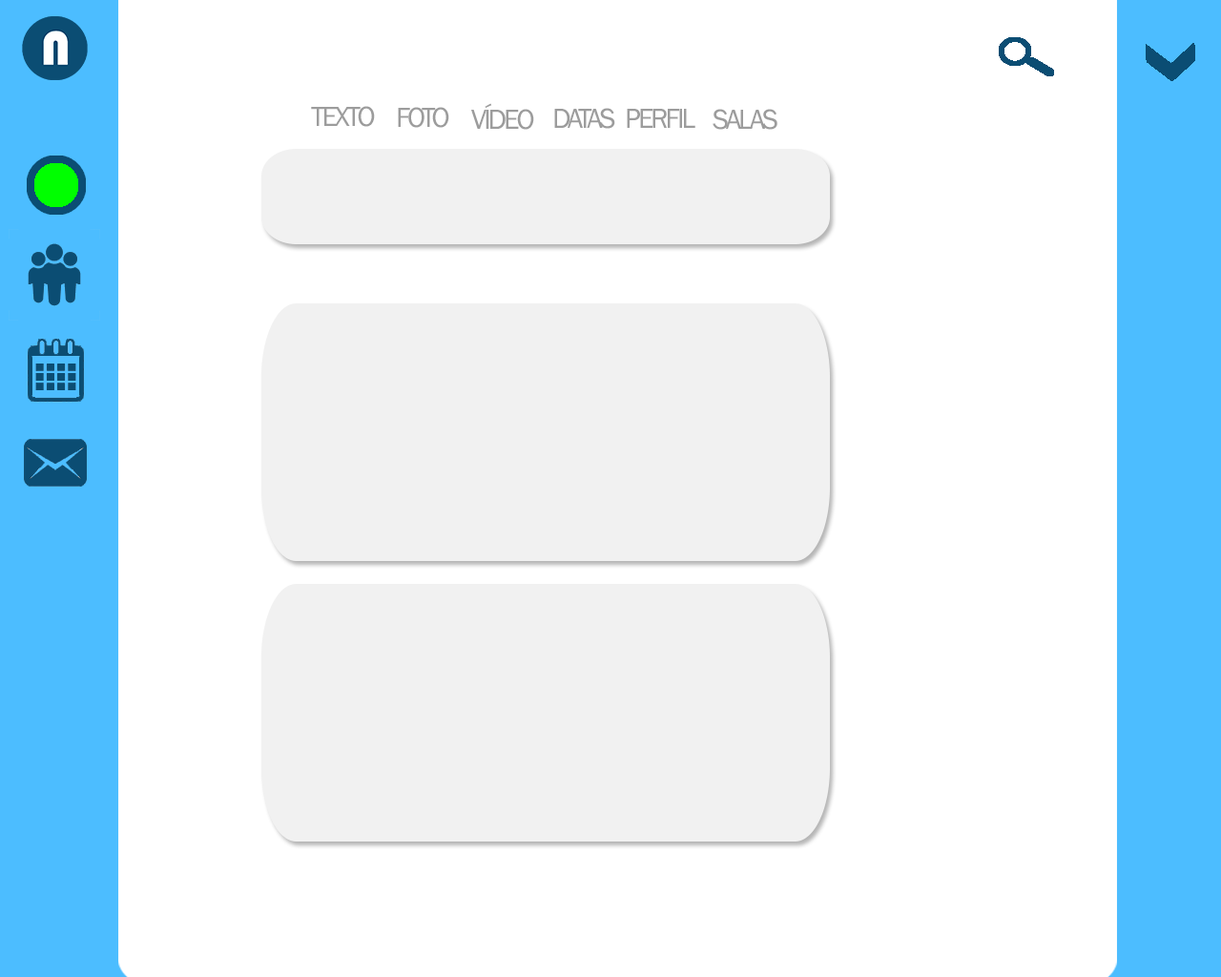
<style>
.page{position:relative;width:1221px;height:977px;background:#ffffff}
.page>*{position:absolute;margin:0}
.t1{font:28.6px "FranklinGothic-Book";letter-spacing:-0.1em;color:#9c9c9c}
</style>
<div class="page">
<p class="t1" style="left:311px;top:106px;width:64px;height:21px">TEXTO</p>
<p class="t1" style="left:398px;top:107px;width:51px;height:21px">FOTO</p>
<p class="t1" style="left:471px;top:103px;width:63px;height:27px">VÍDEO</p>
<p class="t1" style="left:554px;top:108px;width:61px;height:21px">DATAS</p>
<p class="t1" style="left:627px;top:109px;width:68px;height:19px">PERFIL</p>
<p class="t1" style="left:712px;top:109px;width:65px;height:21px">SALAS</p>
</div>
